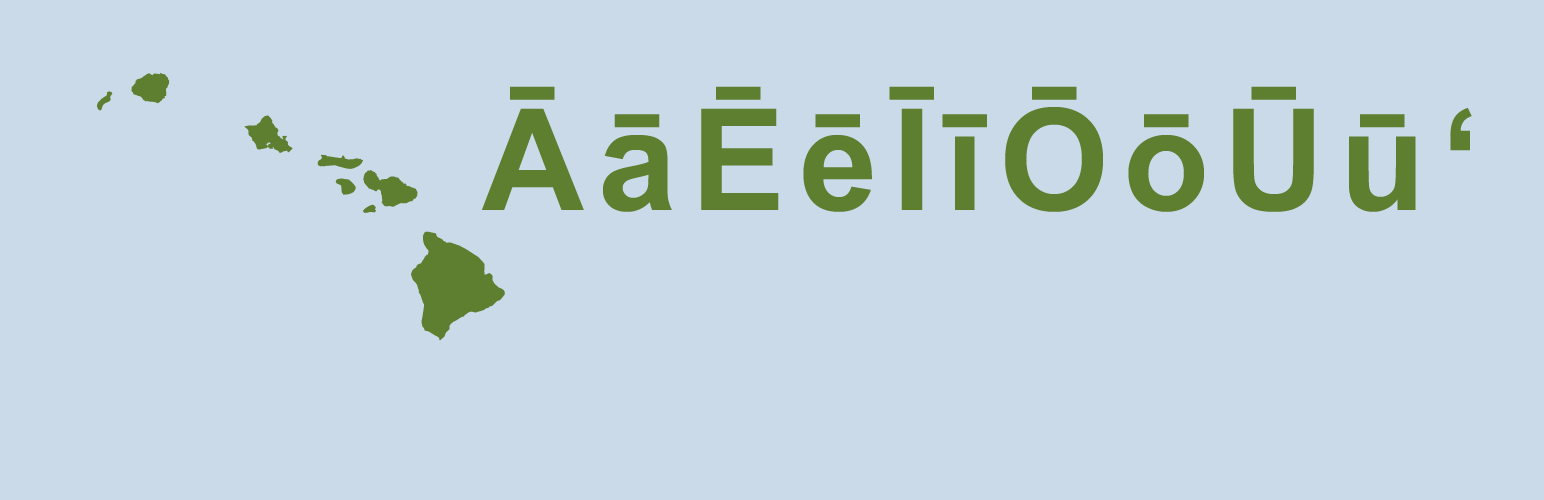
<style>
.page{position:relative;width:1544px;height:500px;background:#cbdae8}
.page>*{position:absolute;margin:0}
.t1{font:141.2px "Arial-BoldMT";letter-spacing:0.1em;color:#5e7e30}
</style>
<div class="page">
<p class="t1" style="left:482px;top:86px;width:990px;height:126px">ĀāĒēĪīŌōŪūʻ</p>
</div>
